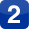
<style>
.page{position:relative;width:29px;height:29px;background:#003399}
.page>*{position:absolute;margin:0}
.t1{font:25px "Helvetica-Bold";color:#ffffff}
</style>
<div class="page">
<p class="t1" style="left:7px;top:5px;width:13px;height:18px">2</p>
</div>
